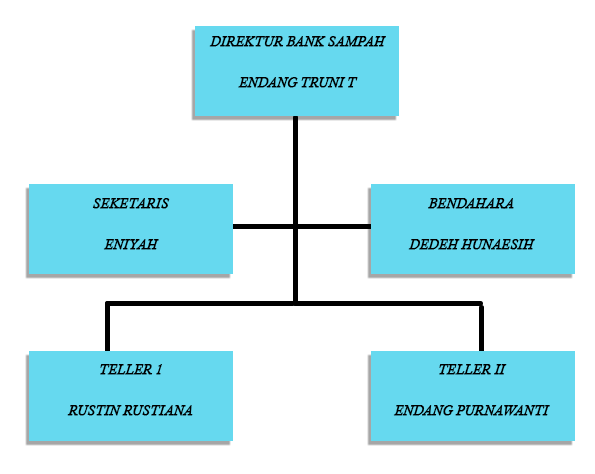
<style>
.page{position:relative;width:595px;height:474px;background:#ffffff}
.page>*{position:absolute;margin:0}
.t1{font:13.6px "CalistoMT-Italic";color:#000000;font-weight:bold}
</style>
<div class="page">
<p class="t1" style="left:209px;top:36px;width:177px;height:11px">DIREKTUR BANK SAMPAH</p>
<p class="t1" style="left:238px;top:77px;width:120px;height:11px">ENDANG TRUNI T</p>
<p class="t1" style="left:92px;top:198px;width:78px;height:11px">SEKETARIS</p>
<p class="t1" style="left:428px;top:198px;width:86px;height:11px">BENDAHARA</p>
<p class="t1" style="left:103px;top:239px;width:56px;height:11px">ENIYAH</p>
<p class="t1" style="left:408px;top:239px;width:127px;height:11px">DEDEH HUNAESIH</p>
<p class="t1" style="left:100px;top:364px;width:62px;height:11px">TELLER 1</p>
<p class="t1" style="left:439px;top:364px;width:68px;height:11px">TELLER II</p>
<p class="t1" style="left:67px;top:405px;width:126px;height:11px">RUSTIN RUSTIANA</p>
<p class="t1" style="left:393px;top:405px;width:157px;height:11px">ENDANG PURNAWANTI</p>
</div>
